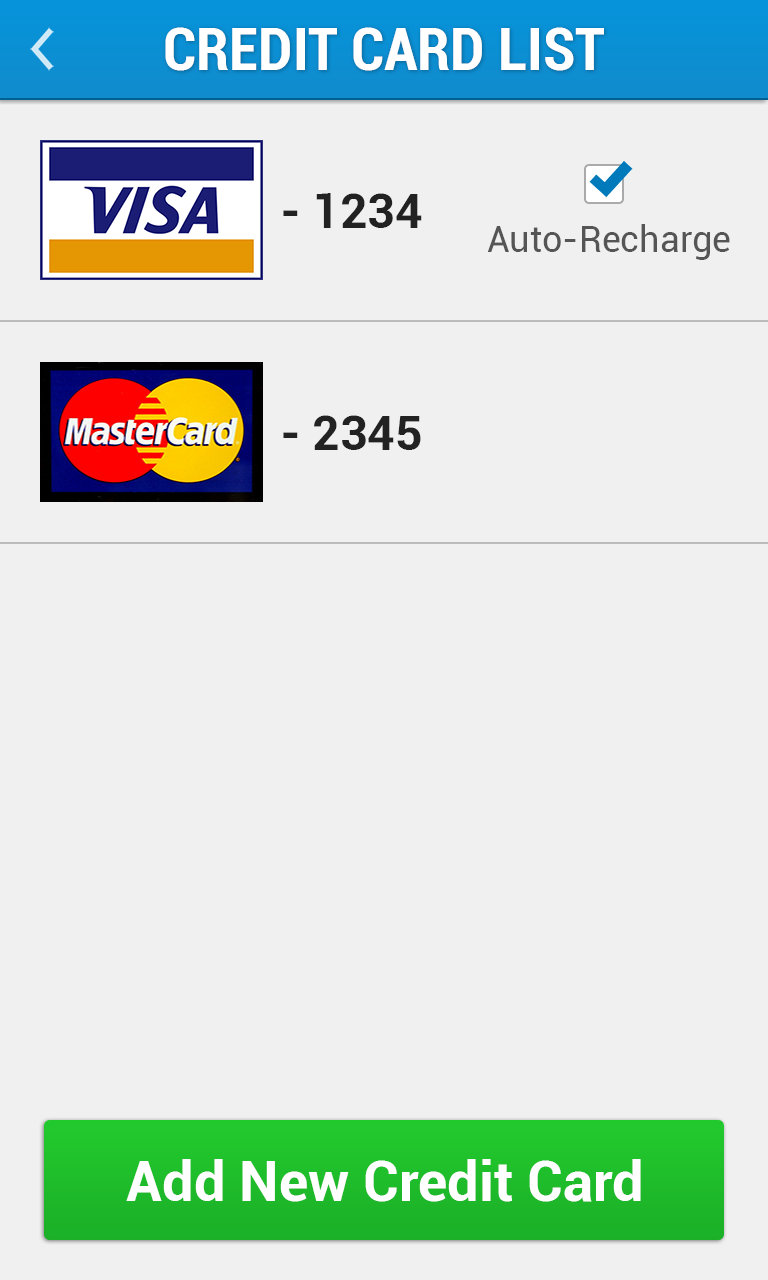
<style>
.page{position:relative;width:768px;height:1280px;background:#f0f0f0}
.page>*{position:absolute;margin:0}
.t1{font:60px "Roboto-BoldCondensed";color:#ffffff}
.t2{font:48px "Roboto-Bold";color:#222222}
.t3{font:36px "Roboto-Regular";color:#555555}
.t4{font:56px "Roboto-Bold";color:#ffffff}
</style>
<div class="page">
<p class="t1" style="left:165px;top:27px;width:439px;height:44px">CREDIT CARD LIST</p>
<p class="t2" style="left:283px;top:193px;width:139px;height:35px">- 1234</p>
<p class="t3" style="left:487px;top:224px;width:243px;height:36px">Auto-Recharge</p>
<p class="t2" style="left:283px;top:415px;width:138px;height:35px">- 2345</p>
<p class="t4" style="left:126px;top:1159px;width:515px;height:43px">Add New Credit Card</p>
</div>
